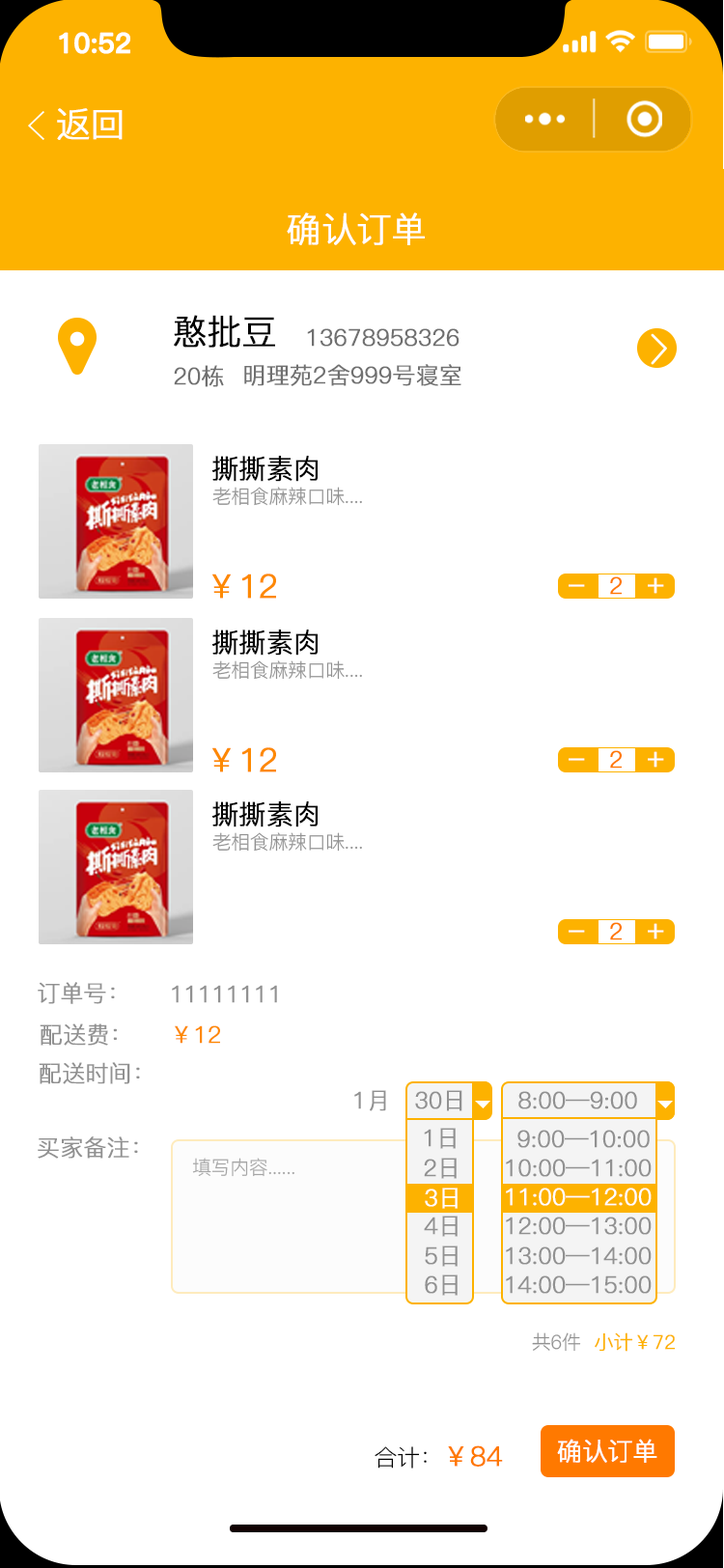
<style>
.page{position:relative;width:724px;height:1568px;background:#ffffff}
.page>*{position:absolute;margin:0}
.t1{font:27.5px "PingFang-SC-Bold";letter-spacing:-0.02em;color:#ffffff;font-weight:bold}
.t2{font:34.8px "PingFang-SC-Regular";letter-spacing:-0.02em;color:#ffffff;font-weight:bold}
.t3{font:34.8px "PingFang-SC-Regular";letter-spacing:-0.02em;color:#000000;font-weight:bold}
.t4{font:23.2px "PingFang-SC-Regular";letter-spacing:-0.02em;color:#707070;font-weight:bold}
.t5{font:27px "PingFang-SC-Regular";letter-spacing:-0.02em;color:#000000;font-weight:bold}
.t6{font:19.3px "PingFang-SC-Regular";letter-spacing:-0.02em;color:#919191}
.t7{font:32.8px "PingFang-SC-Regular";letter-spacing:-0.02em;color:#fd8900;font-weight:bold}
.t8{font:23.2px "PingFang-SC-Regular";letter-spacing:-0.02em;color:#ff7900;font-weight:bold}
.t9{font:29px "PingFang-SC-Regular";letter-spacing:-0.02em;color:#ffffff;font-weight:bold}
.t10{font:23.2px "PingFang-SC-Regular";letter-spacing:-0.02em;color:#919191;font-weight:bold}
.t11{font:23.2px "PingFang-SC-Regular";letter-spacing:-0.02em;color:#fd8900;font-weight:bold}
.t12{font:23.2px "PingFang-SC-Regular";letter-spacing:-0.02em;color:#ffffff;font-weight:bold}
.t13{font:19.3px "PingFang-SC-Regular";letter-spacing:-0.02em;color:#fdb200;font-weight:bold}
.t14{font:23.2px "PingFang-SC-Regular";letter-spacing:-0.02em;color:#000000}
.t15{font:27px "PingFang-SC-Regular";letter-spacing:-0.02em;color:#ff7900;font-weight:bold}
.t16{font:25.1px "PingFang-SC-Regular";letter-spacing:-0.02em;color:#fefefe;font-weight:bold}
</style>
<div class="page">
<p class="t1" style="left:59px;top:32px;width:71px;height:22px">10:52</p>
<p class="t2" style="left:57px;top:108px;width:66px;height:32px">返回</p>
<p class="t2" style="left:287px;top:212px;width:138px;height:33px">确认订单</p>
<p class="t3" style="left:174px;top:315px;width:101px;height:33px">憨批豆</p>
<p class="t4" style="left:307px;top:328px;width:153px;height:19px">13678958326</p>
<p class="t4" style="left:174px;top:365px;width:50px;height:22px">20栋</p>
<p class="t4" style="left:244px;top:364px;width:218px;height:22px">明理苑2舍999号寝室</p>
<p class="t5" style="left:212px;top:456px;width:106px;height:26px">撕撕素肉</p>
<p class="t6" style="left:212px;top:487px;width:150px;height:19px">老相食麻辣口味....</p>
<p class="t7" style="left:212px;top:574px;width:64px;height:25px">￥12</p>
<p class="t8" style="left:610px;top:576px;width:12px;height:19px">2</p>
<p class="t9" style="left:648px;top:577px;width:16px;height:17px">+</p>
<p class="t9" style="left:569px;top:584px;width:16px;height:3px">-</p>
<p class="t5" style="left:212px;top:630px;width:106px;height:26px">撕撕素肉</p>
<p class="t6" style="left:212px;top:660px;width:150px;height:20px">老相食麻辣口味....</p>
<p class="t7" style="left:212px;top:747px;width:64px;height:25px">￥12</p>
<p class="t9" style="left:569px;top:758px;width:16px;height:3px">-</p>
<p class="t8" style="left:610px;top:750px;width:12px;height:19px">2</p>
<p class="t9" style="left:648px;top:751px;width:16px;height:17px">+</p>
<p class="t5" style="left:212px;top:801px;width:106px;height:26px">撕撕素肉</p>
<p class="t6" style="left:212px;top:832px;width:150px;height:20px">老相食麻辣口味....</p>
<p class="t9" style="left:569px;top:930px;width:16px;height:3px">-</p>
<p class="t8" style="left:610px;top:922px;width:12px;height:18px">2</p>
<p class="t9" style="left:648px;top:923px;width:16px;height:16px">+</p>
<p class="t10" style="left:38px;top:982px;width:77px;height:22px">订单号：</p>
<p class="t10" style="left:172px;top:985px;width:105px;height:18px">11111111</p>
<p class="t10" style="left:40px;top:1023px;width:77px;height:23px">配送费：</p>
<p class="t11" style="left:175px;top:1025px;width:45px;height:19px">￥12</p>
<p class="t10" style="left:39px;top:1062px;width:101px;height:22px">配送时间：</p>
<p class="t10" style="left:354px;top:1090px;width:32px;height:21px">1月</p>
<p class="t10" style="left:415px;top:1090px;width:47px;height:21px">30日</p>
<p class="t10" style="left:518px;top:1091px;width:119px;height:18px">8:00—9:00</p>
<p class="t10" style="left:424px;top:1128px;width:32px;height:21px">1日</p>
<p class="t10" style="left:518px;top:1130px;width:132px;height:18px">9:00—10:00</p>
<p class="t10" style="left:38px;top:1136px;width:100px;height:23px">买家备注：</p>
<p class="t6" style="left:192px;top:1158px;width:102px;height:19px;opacity:0.83">填写内容......</p>
<p class="t10" style="left:424px;top:1158px;width:33px;height:21px">2日</p>
<p class="t10" style="left:506px;top:1159px;width:146px;height:18px">10:00—11:00</p>
<p class="t12" style="left:425px;top:1188px;width:33px;height:21px">3日</p>
<p class="t12" style="left:506px;top:1188px;width:146px;height:18px">11:00—12:00</p>
<p class="t10" style="left:424px;top:1216px;width:34px;height:21px">4日</p>
<p class="t10" style="left:506px;top:1217px;width:146px;height:18px">12:00—13:00</p>
<p class="t10" style="left:425px;top:1246px;width:33px;height:21px">5日</p>
<p class="t10" style="left:506px;top:1246px;width:146px;height:19px">13:00—14:00</p>
<p class="t10" style="left:425px;top:1274px;width:33px;height:22px">6日</p>
<p class="t10" style="left:506px;top:1275px;width:146px;height:19px">14:00—15:00</p>
<p class="t6" style="left:532px;top:1332px;width:49px;height:20px">共6件</p>
<p class="t13" style="left:595px;top:1332px;width:81px;height:20px">小计￥72</p>
<p class="t14" style="left:375px;top:1445px;width:128px;height:24px">合计：<span class="t15">￥84</span></p>
<p class="t16" style="left:557px;top:1439px;width:101px;height:24px">确认订单</p>
</div>
